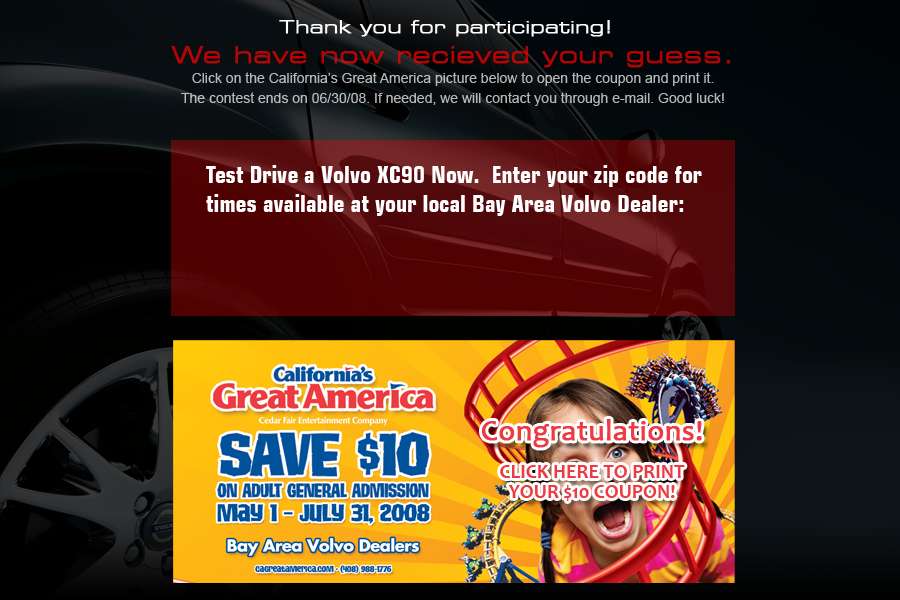
<style>
.page{position:relative;width:900px;height:600px}
.page>*{position:absolute;margin:0}
.t1{font:18px "Square721BT-RomanExtended";color:#ffffff;font-weight:bold}
.t2{font:14px/20px "ArialMT"}
.t3{font:24px/37px "Square721BT-RomanExtended";font-weight:bold}
.t4{font:24px "Square721BT-BoldCondensed";color:#ffffff}
.t5{font:30px "Candara";color:#ee3a43;font-weight:bold}
.t6{font:20px/20px "Candara-Bold";color:#ee3a43}
</style>
<div class="page">
<p class="t1" style="left:279px;top:20px;width:331px;height:17px">Thank you for participating!</p>
<p class="t2" style="left:171px;top:46px;width:560px;height:60px;text-align:center"><span class="t3">We have now recieved your guess.<br></span>Click on the California’s Great America picture below to open the coupon and print it.<br>The contest ends on 06/30/08. If needed, we will contact you through e-mail. Good luck!</p>
<p class="t4" style="left:206px;top:165px;width:496px;height:51px">Test Drive a Volvo XC90 Now.  Enter your zip code for<br>times available at your local Bay Area Volvo Dealer:</p>
<p class="t5" style="left:482px;top:419px;width:220px;height:29px">Congratulations!</p>
<p class="t6" style="left:500px;top:465px;width:185px;height:36px;text-align:center">CLICK HERE TO PRINT<br>YOUR $10 COUPON!</p>
</div>
